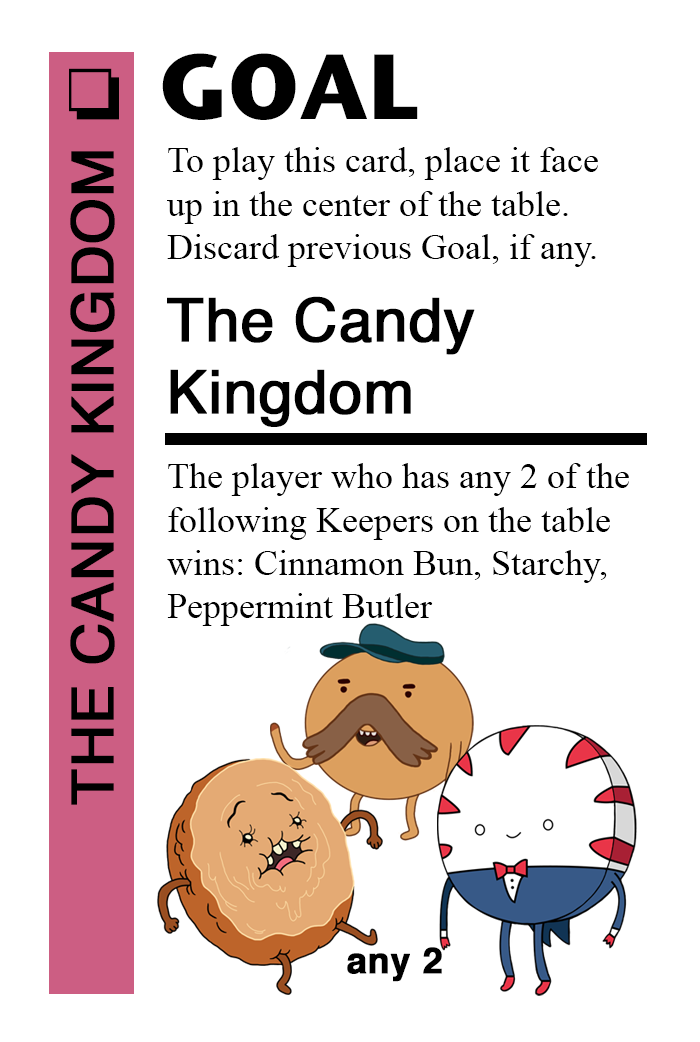
<style>
.page{position:relative;width:700px;height:1042px;background:#ffffff}
.page>*{position:absolute;margin:0}
.t1{font:92px "StoneSansITC-Bold";color:#000000}
.t2{font:72px "MS-Gothic";color:#000000}
.t3{font:36px "TimesNewRomanPSMT";color:#000000}
.t4{font:58px "Helvetica";color:#000000;font-weight:bold}
.t5{font:60px "Helvetica";color:#000000;font-weight:bold}
.t6{font:36px "Helvetica-Bold";color:#000000;font-weight:bold}
</style>
<div class="page">
<p class="t1" style="left:162px;top:53px;width:256px;height:67px">GOAL</p>
<p class="t2" style="left:69px;top:68px;width:50px;height:52px">❏</p>
<p class="t3" style="left:167px;top:147px;width:431px;height:120px">To play this card, place it face<br>up in the center of the table.<br>Discard previous Goal, if any.</p>
<p class="t4" style="left:70px;top:151px;width:45px;height:654px;rotate:-90deg">THE CANDY KINGDOM</p>
<p class="t5" style="left:167px;top:296px;width:308px;height:131px">The Candy<br>Kingdom</p>
<p class="t3" style="left:167px;top:463px;width:462px;height:163px">The player who has any 2 of the <br>following Keepers on the table <br>wins: Cinnamon Bun, Starchy,<br>Peppermint Butler</p>
<p class="t6" style="left:347px;top:947px;width:95px;height:35px">any 2</p>
</div>
